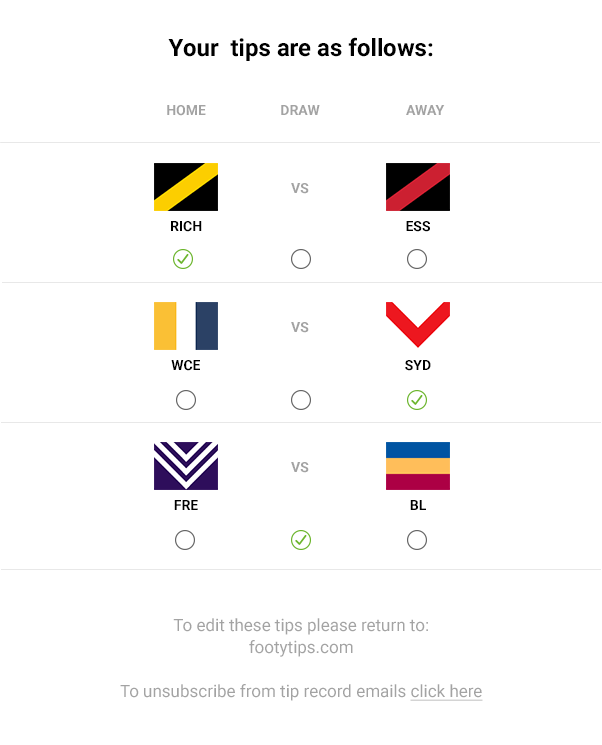
<style>
.page{position:relative;width:602px;height:745px;background:#ffffff}
.page>*{position:absolute;margin:0}
.t1{font:24px "Roboto-Bold";color:#000000}
.t2{font:14px "Roboto-Bold";color:#a3a3a3}
.t3{font:14px "Roboto-Bold";color:#000000}
.t4{font:17px/22px "Roboto-Regular";color:#a3a3a3}
.t5{font:17px/22px "Roboto-Regular";color:#a3a3a3;text-decoration:underline}
</style>
<div class="page">
<p class="t1" style="left:168px;top:37px;width:265px;height:24px">Your  tips are as follows:</p>
<p class="t2" style="left:167px;top:105px;width:39px;height:11px">HOME</p>
<p class="t2" style="left:281px;top:105px;width:39px;height:10px">DRAW</p>
<p class="t2" style="left:406px;top:105px;width:39px;height:10px">AWAY</p>
<p class="t2" style="left:291px;top:183px;width:18px;height:11px">VS</p>
<p class="t3" style="left:171px;top:221px;width:31px;height:11px">RICH</p>
<p class="t3" style="left:406px;top:221px;width:24px;height:11px">ESS</p>
<p class="t2" style="left:291px;top:322px;width:18px;height:11px">VS</p>
<p class="t3" style="left:171px;top:360px;width:29px;height:11px">WCE</p>
<p class="t3" style="left:405px;top:360px;width:26px;height:11px">SYD</p>
<p class="t2" style="left:291px;top:462px;width:18px;height:11px">VS</p>
<p class="t3" style="left:174px;top:500px;width:24px;height:10px">FRE</p>
<p class="t3" style="left:410px;top:500px;width:16px;height:10px">BL</p>
<p class="t4" style="left:120px;top:618px;width:363px;height:83px;text-align:center">To edit these tips please return to:<br>footytips.com<br><br>To unsubscribe from tip record emails <span class="t5">click here</span></p>
</div>
